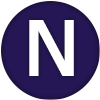
<style>
.page{position:relative;width:100px;height:100px;background:#ffffff}
.page>*{position:absolute;margin:0}
.t1{font:75.7px "Verdana";letter-spacing:0.05em;color:#ffffff;font-weight:bold}
</style>
<div class="page">
<p class="t1" style="left:29px;top:20px;width:45px;height:56px">N</p>
</div>
